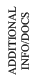
<style>
.page{position:relative;width:35px;height:77px;background:#ffffff}
.page>*{position:absolute;margin:0}
.t1{font:11px "TimesNewRomanPSMT";color:#0c0c0c}
</style>
<div class="page">
<p class="t1" style="left:8px;top:6px;width:22px;height:69px;text-align:center;rotate:-90deg">ADDITIONAL<br>INFO/DOCS</p>
</div>
